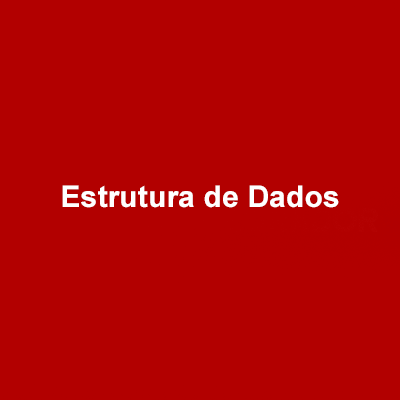
<style>
.page{position:relative;width:400px;height:400px;background:#b20000}
.page>*{position:absolute;margin:0}
.t1{font:30px "Arial-BoldMT";letter-spacing:0.005em;color:#ffffff}
</style>
<div class="page">
<p class="t1" style="left:62px;top:185px;width:277px;height:23px">Estrutura de Dados</p>
</div>
